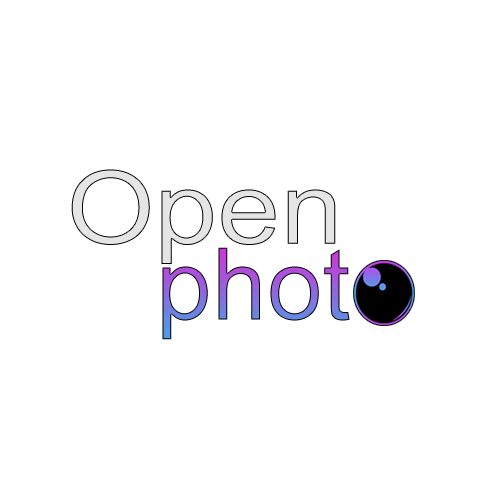
<style>
.page{position:relative;width:500px;height:500px;background:#ffffff}
.page>*{position:absolute;margin:0}
.t1{font:101.5px "ArialMT";color:#e5e5e5;scale:1.11 1}
.t2{font:100px "ArialMT"}
</style>
<div class="page">
<p class="t1" style="left:71px;top:169px;width:265px;height:95px">Open</p>
<p class="t2" style="left:162px;top:247px;width:188px;height:93px">phot</p>
</div>
